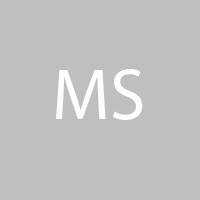
<style>
.page{position:relative;width:200px;height:200px;background:#bfbfbf}
.page>*{position:absolute;margin:0}
.t1{font:72px "MyriadPro-Regular";color:#ffffff}
</style>
<div class="page">
<p class="t1" style="left:56px;top:69px;width:87px;height:51px">MS</p>
</div>
